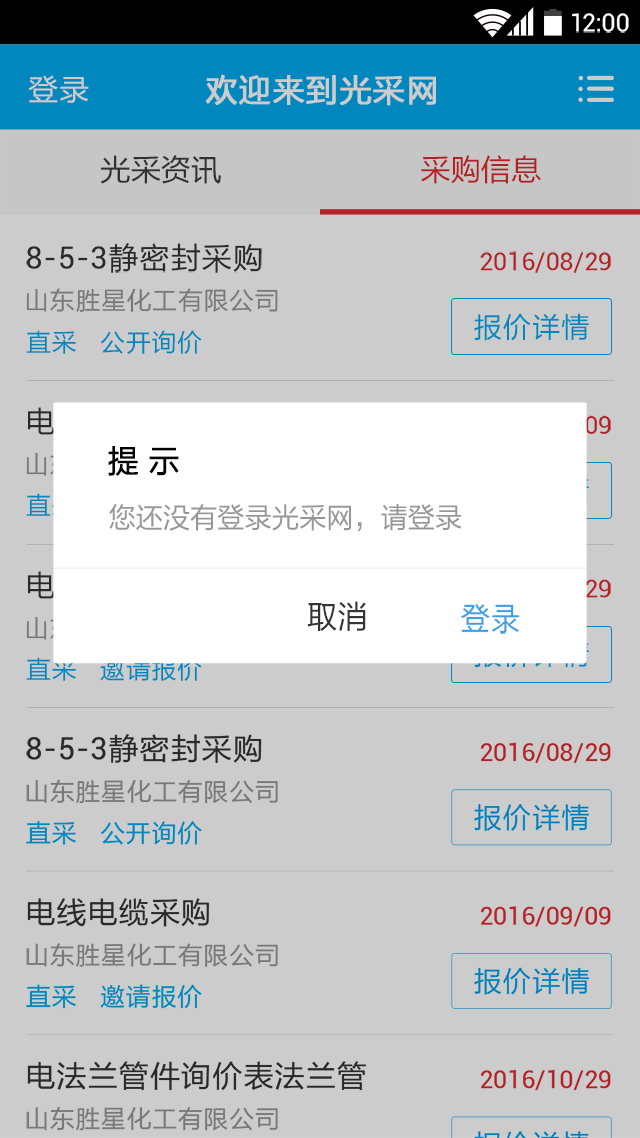
<style>
.page{position:relative;width:640px;height:1138px;background:#cccccc}
.page>*{position:absolute;margin:0}
.t1{font:24.9px "Roboto-Regular";color:#ffffff}
.t2{font:30.2px "FZLTHJW--GB1-0";letter-spacing:0.03em;color:#cccccc}
.t3{font:32px "FZLTHJW--GB1-0";letter-spacing:0.02em;color:#cccccc;font-weight:bold}
.t4{font:30.2px "FZLTHJW--GB1-0";color:#3d3d3d}
.t5{font:30.2px "FZLTHJW--GB1-0";color:#b42125}
.t6{font:30.2px "Roboto-Regular";letter-spacing:0.03em;color:#333333}
.t7{font:30.2px "FZLTHJW--GB1-0";letter-spacing:0.03em;color:#333333}
.t8{font:24.9px "Roboto-Regular";color:#b42125}
.t9{font:24.9px "FZLTHJW--GB1-0";letter-spacing:0.03em;color:#787878}
.t10{font:28.4px "FZLTHJW--GB1-0";letter-spacing:0.03em;color:#0088be}
.t11{font:24.9px "FZLTHJW--GB1-0";letter-spacing:0.03em;color:#0088be}
.t12{font:32px "FZLTHJW--GB1-0";color:#030303;font-weight:bold;scale:0.96 1}
.t13{font:28.4px "FZLTHJW--GB1-0";color:#969696;scale:0.96 1}
.t14{font:32px "FZLTHJW--GB1-0";color:#333333;scale:0.96 1}
.t15{font:32px "PingFang-SC-Medium";color:#3c9fe6;scale:0.96 1}
</style>
<div class="page">
<p class="t1" style="left:572px;top:13px;width:57px;height:20px">12:00</p>
<p class="t2" style="left:28px;top:75px;width:61px;height:28px">登录</p>
<p class="t3" style="left:205px;top:74px;width:231px;height:32px">欢迎来到光采网</p>
<p class="t4" style="left:100px;top:155px;width:121px;height:29px">光采资讯</p>
<p class="t5" style="left:421px;top:155px;width:120px;height:29px">采购信息</p>
<p class="t6" style="left:26px;top:243px;width:236px;height:30px">8-5-3<span class="t7">静密封采购</span></p>
<p class="t8" style="left:480px;top:251px;width:131px;height:22px">2016/08/29</p>
<p class="t9" style="left:26px;top:288px;width:252px;height:24px">山东胜星化工有限公司</p>
<p class="t10" style="left:474px;top:313px;width:115px;height:28px">报价详情</p>
<p class="t11" style="left:26px;top:330px;width:176px;height:24px">直采   公开询价</p>
<p class="t12" style="left:108px;top:446px;width:71px;height:30px">提 示</p>
<p class="t13" style="left:109px;top:504px;width:353px;height:28px">您还没有登录光采网，请登录</p>
<p class="t14" style="left:307px;top:601px;width:59px;height:30px">取消</p>
<p class="t15" style="left:461px;top:603px;width:59px;height:31px">登录</p>
<p class="t11" style="left:26px;top:657px;width:176px;height:24px">直采   邀请报价</p>
</div>
